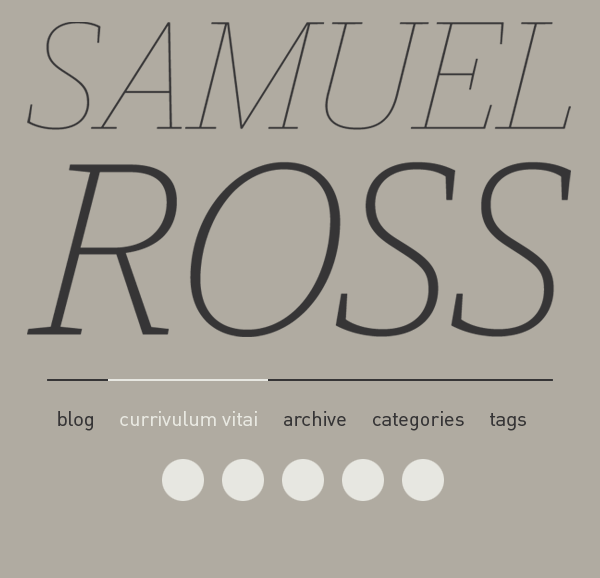
<style>
.page{position:relative;width:600px;height:578px;background:#b0aba1}
.page>*{position:absolute;margin:0}
.t1{font:20px "DINPro-Regular";color:#363536}
.t2{font:20px "DINPro-Regular";color:#e8e8e1}
</style>
<div class="page">
<p class="t1" style="left:58px;top:411px;width:468px;height:20px">blog     <span class="t2">currivulum vitai</span>     archive     categories     tags</p>
</div>
